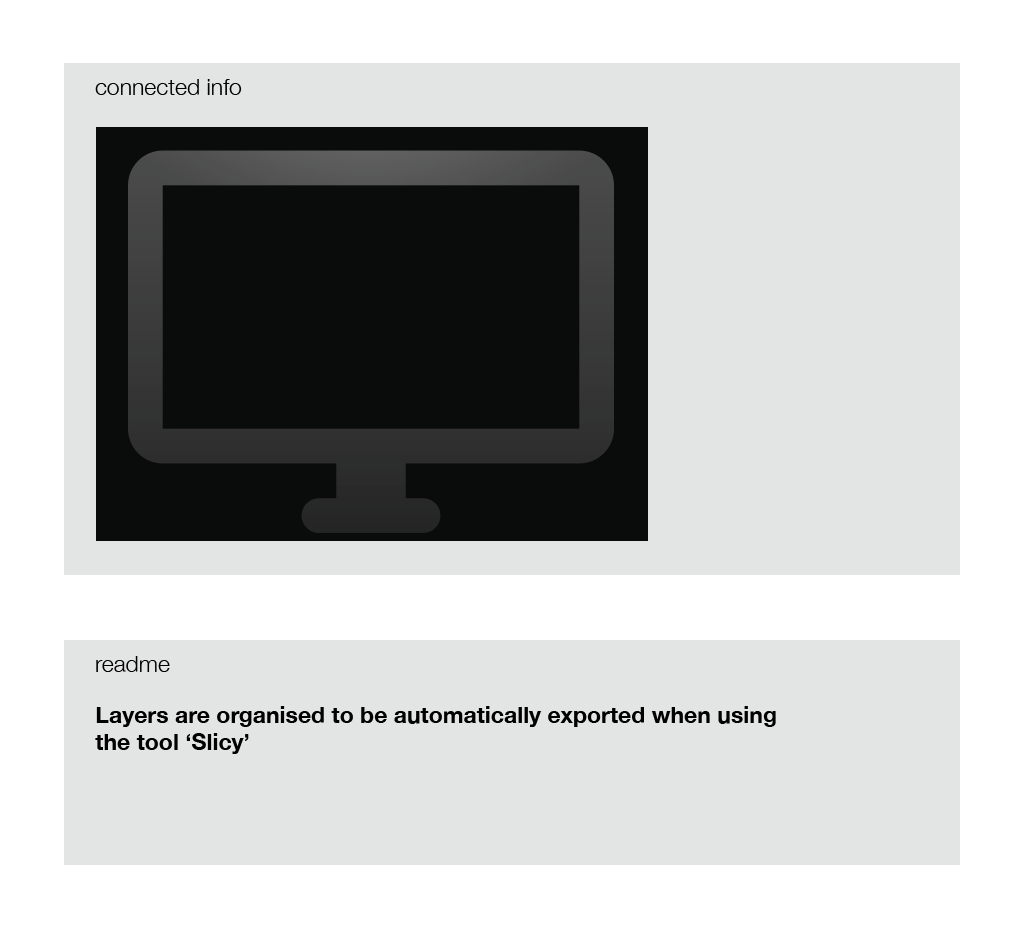
<style>
.page{position:relative;width:1024px;height:928px;background:#e3e4e4}
.page>*{position:absolute;margin:0}
.t1{font:23px "HelveticaNeue-Light";color:#000000}
.t2{font:23px "HelveticaNeue-Bold";color:#000000}
</style>
<div class="page">
<p class="t1" style="left:95px;top:79px;width:147px;height:16px">connected info</p>
<p class="t1" style="left:96px;top:656px;width:74px;height:16px">readme</p>
<p class="t2" style="left:95px;top:706px;width:681px;height:48px">Layers are organised to be automatically exported when using<br>the tool ‘Slicy’</p>
</div>
